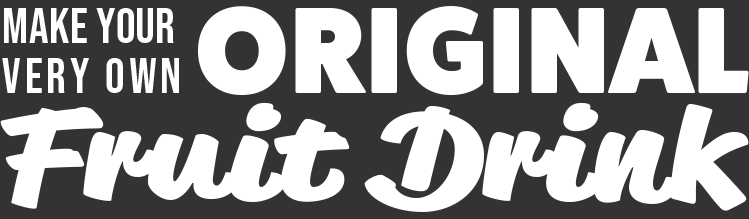
<style>
.page{position:relative;width:749px;height:219px;background:#333333}
.page>*{position:absolute;margin:0}
.t1{font:123.3px "FatFrank-Heavy";color:#ffffff;text-transform:uppercase}
.t2{font:49.3px/50px "BebasNeue-Regular";letter-spacing:0.01em;color:#ffffff;text-transform:uppercase}
.t3{font:49.3px/50px "BebasNeue-Regular";letter-spacing:0.085em;color:#ffffff;text-transform:uppercase}
.t4{font:123.9px "ReklameScript-Black";color:#ffffff}
.t5{font:123.9px "ReklameScript-Black";color:#ffffff;text-transform:uppercase}
</style>
<div class="page">
<p class="t1" style="left:198px;top:6px;width:551px;height:90px">Original</p>
<p class="t2" style="left:2px;top:8px;width:177px;height:85px">MAKE your<br><span class="t3">very own</span></p>
<p class="t4" style="left:0px;top:102px;width:749px;height:110px"><span class="t5">F</span>ruit Drink</p>
</div>
